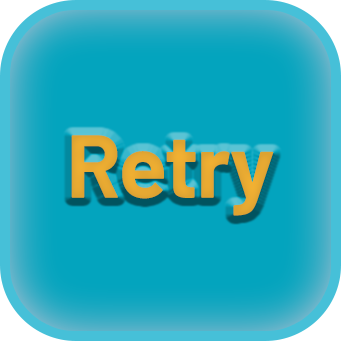
<style>
.page{position:relative;width:341px;height:341px;background:#03a4be}
.page>*{position:absolute;margin:0}
.t1{font:89.2px "Barlow-Bold";letter-spacing:-0.02em;color:#f7b432}
</style>
<div class="page">
<p class="t1" style="left:71px;top:135px;width:203px;height:81px">Retry</p>
</div>
